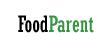
<style>
.page{position:relative;width:112px;height:48px;background:#ffffff}
.page>*{position:absolute;margin:0}
.t1{font:22.6px "Rockwell-Condensed";color:#369443}
.t2{font:22.6px "Rockwell-Condensed";color:#000000}
</style>
<div class="page">
<p class="t1" style="left:18px;top:15px;width:76px;height:18px"><span class="t2">Food</span>Parent</p>
</div>
